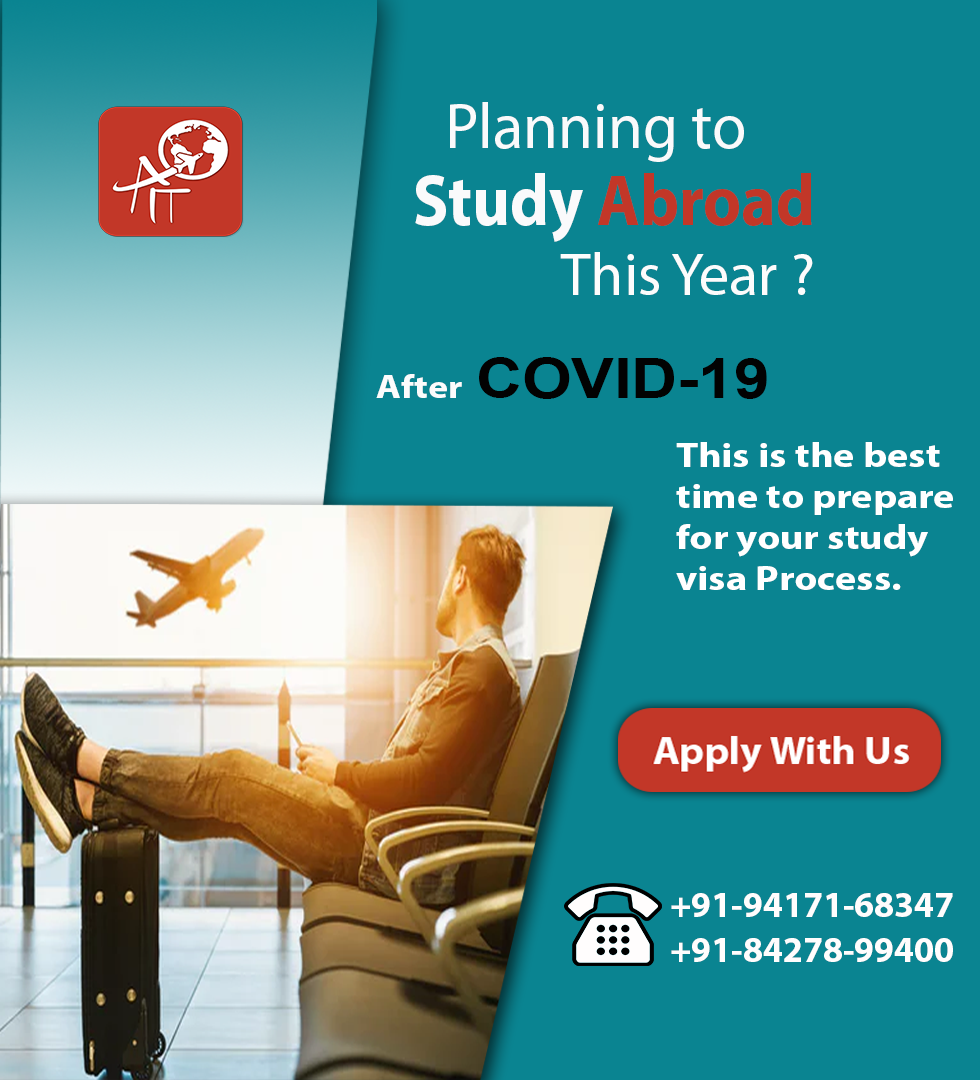
<style>
.page{position:relative;width:980px;height:1080px;background:#0a8491}
.page>*{position:absolute;margin:0}
.t1{font:64.6px "MyriadPro-Regular";color:#fafafb}
.t2{font:72.9px "MyriadPro-Bold";color:#c23728;scale:0.9 1}
.t3{font:72.9px "MyriadPro-Bold";color:#fafafb;scale:0.9 1}
.t4{font:60px "MyriadPro-Regular";color:#fcfcfc}
.t5{font:55.1px "Arial-BoldMT";color:#020202;scale:1.15 1}
.t6{font:33.1px "MyriadPro-Bold";color:#fcfcfc;scale:1.15 1}
.t7{font:34.3px "MyriadPro-Bold";color:#ffffff;scale:1.18 1}
.t8{font:36px "MyriadPro-Bold";color:#fffdfd}
</style>
<div class="page">
<p class="t1" style="left:450px;top:102px;width:294px;height:60px">Planning to</p>
<p class="t2" style="left:415px;top:173px;width:397px;height:69px"><span class="t3">Study </span>Abroad</p>
<p class="t4" style="left:560px;top:252px;width:253px;height:43px">This Year ?</p>
<p class="t5" style="left:376px;top:357px;width:391px;height:42px"><span class="t6">After </span>COVID-19</p>
<p class="t7" style="left:676px;top:442px;width:277px;height:148px">This is the best<br>time to prepare<br>for your study<br>visa Process.</p>
<p class="t8" style="left:671px;top:893px;width:282px;height:24px">+91-94171-68347</p>
<p class="t8" style="left:671px;top:938px;width:282px;height:24px">+91-84278-99400</p>
</div>
